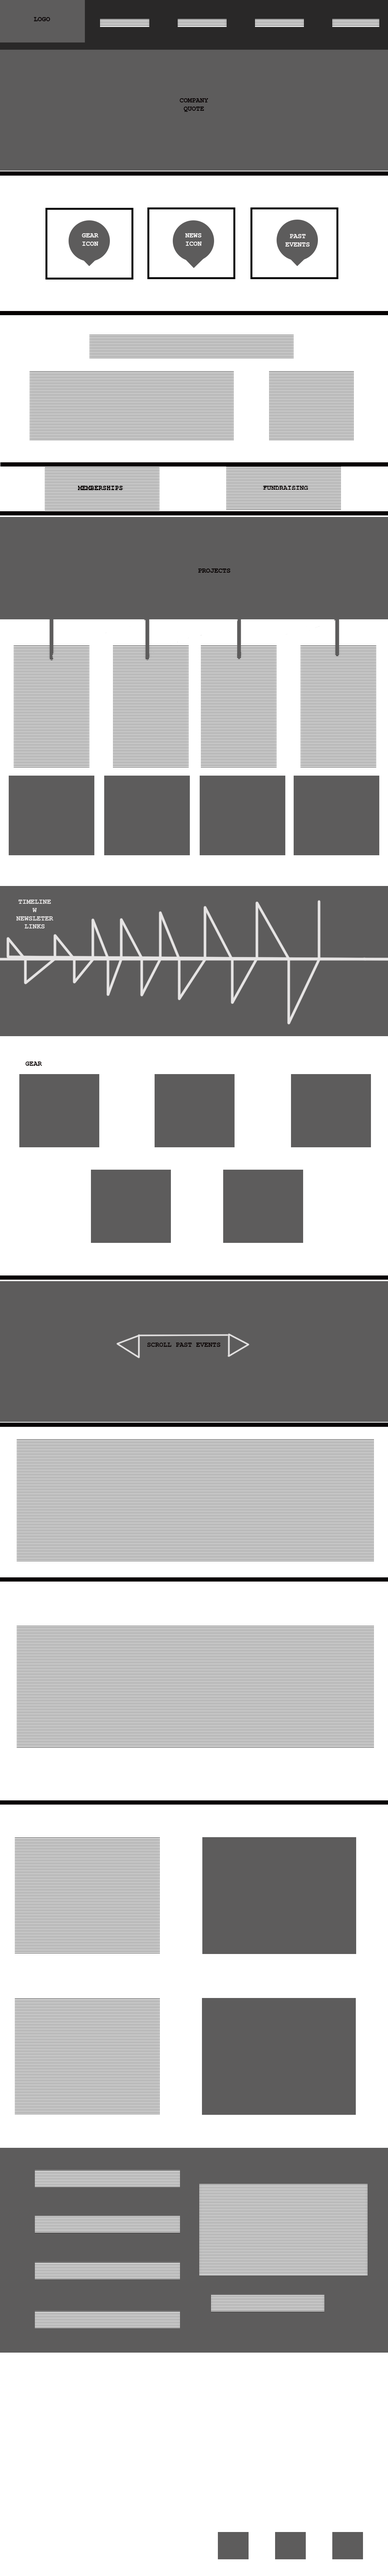
<style>
.page{position:relative;width:388px;height:2576px;background:#ffffff}
.page>*{position:absolute;margin:0}
.t1{font:6.8px "CourierNewPS-BoldMT";color:#060001}
.t2{font:6.8px "CourierNewPS-BoldMT";color:#fbfafa}
.t3{font:6.8px "CourierNewPS-BoldMT";color:#faf7f7}
.t4{font:6.8px "CourierNewPS-BoldMT";color:#060000}
.t5{font:6.8px "CourierNewPS-BoldMT";color:#e6e4e4}
.t6{font:6.8px "CourierNewPS-BoldMT";color:#080101}
</style>
<div class="page">
<p class="t1" style="left:34px;top:17px;width:16px;height:4px">LOGO</p>
<p class="t1" style="left:180px;top:98px;width:29px;height:14px;text-align:center">COMPANY<br>QUOTE</p>
<p class="t2" style="left:82px;top:233px;width:17px;height:13px">GEAR<br>ICON</p>
<p class="t2" style="left:185px;top:233px;width:17px;height:13px">NEWS<br>ICON</p>
<p class="t3" style="left:286px;top:234px;width:24px;height:13px;text-align:center">PAST <br>EVENTS</p>
<p class="t4" style="left:78px;top:486px;width:45px;height:4px">MEMBERSHIPS</p>
<p class="t4" style="left:263px;top:486px;width:45px;height:4px">FUNDRAISING</p>
<p class="t5" style="left:16px;top:900px;width:37px;height:28px;text-align:center">TIMELINE<br>W<br>NEWSLETER<br>LINKS</p>
<p class="t6" style="left:25px;top:1062px;width:17px;height:4px">GEAR</p>
<p class="t6" style="left:147px;top:1343px;width:74px;height:4px">SCROLL PAST EVENTS</p>
</div>
